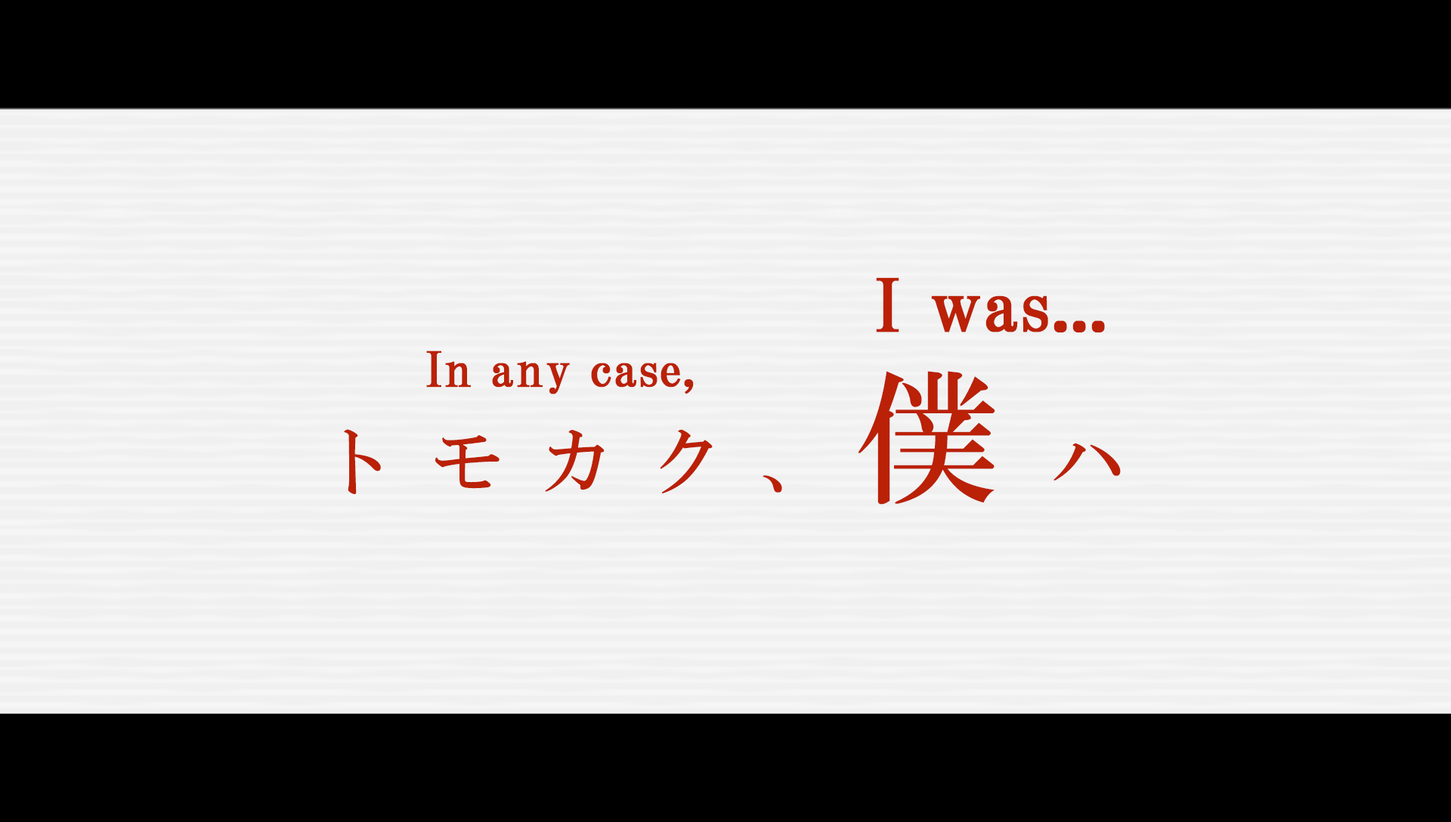
<style>
.page{position:relative;width:1451px;height:822px;background:#f0f0f0}
.page>*{position:absolute;margin:0}
.t1{font:72.5px "HGPMinchoB";letter-spacing:0.01em;color:#ba2107;font-weight:bold}
.t2{font:48.4px "HGPMinchoB";letter-spacing:0.01em;color:#ba2107;font-weight:bold}
.t3{font:146.6px "HGMinchoB";letter-spacing:0.26em;color:#ba2107}
.t4{font:73.3px "HGMinchoB";letter-spacing:0.5em;color:#ba2107}
</style>
<div class="page">
<p class="t1" style="left:876px;top:277px;width:229px;height:55px">I was...</p>
<p class="t2" style="left:426px;top:351px;width:268px;height:43px">In any case,</p>
<p class="t3" style="left:858px;top:371px;width:137px;height:134px">僕</p>
<p class="t4" style="left:344px;top:429px;width:776px;height:65px">トモカク、   ハ</p>
</div>
